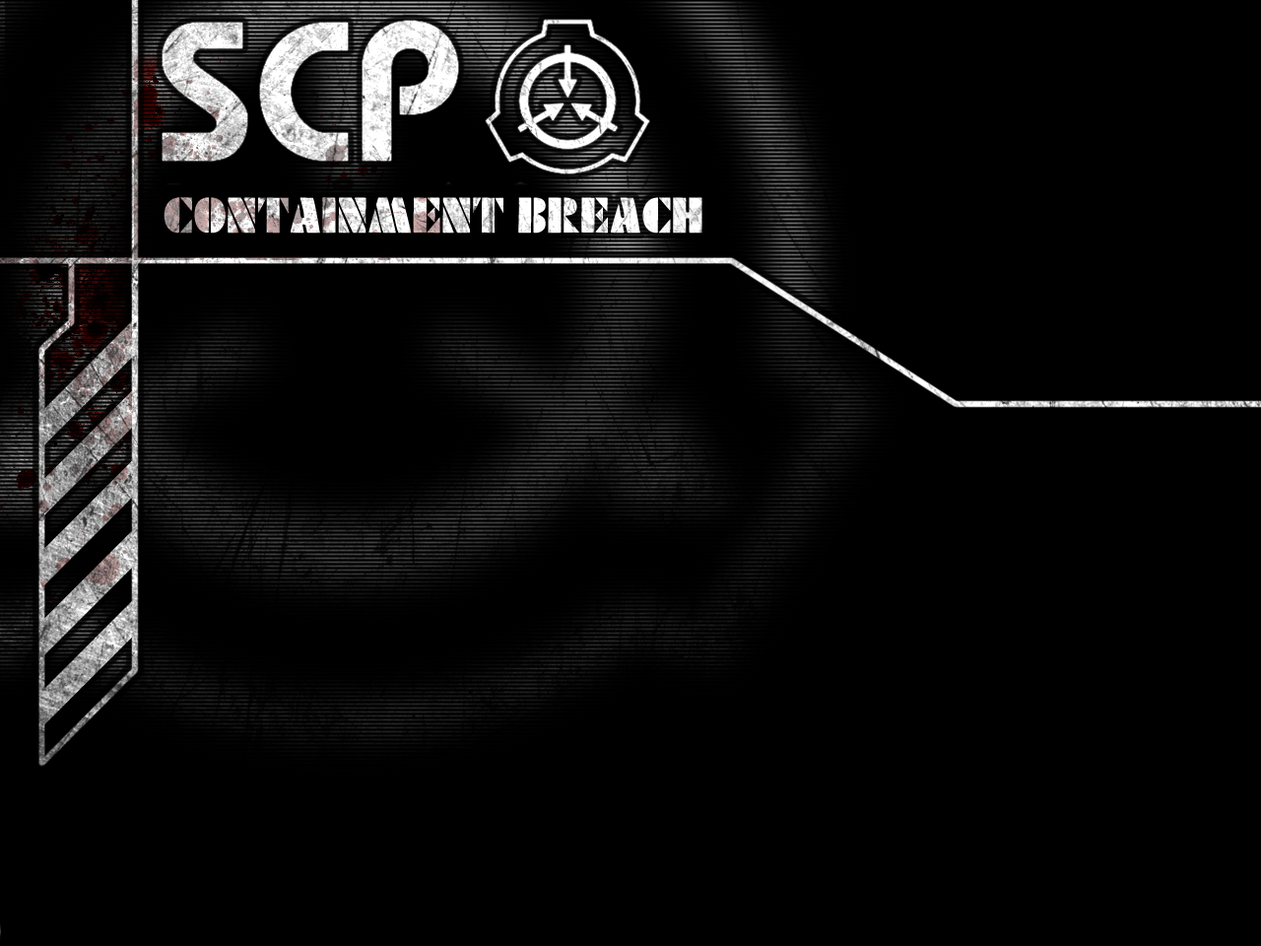
<style>
.page{position:relative;width:1261px;height:946px;background:#000000}
.page>*{position:absolute;margin:0}
.t1{font:44.3px "Excess"}
</style>
<div class="page">
<p class="t1" style="left:164px;top:197px;width:538px;height:36px">CONTAINMENT BREACH</p>
</div>
